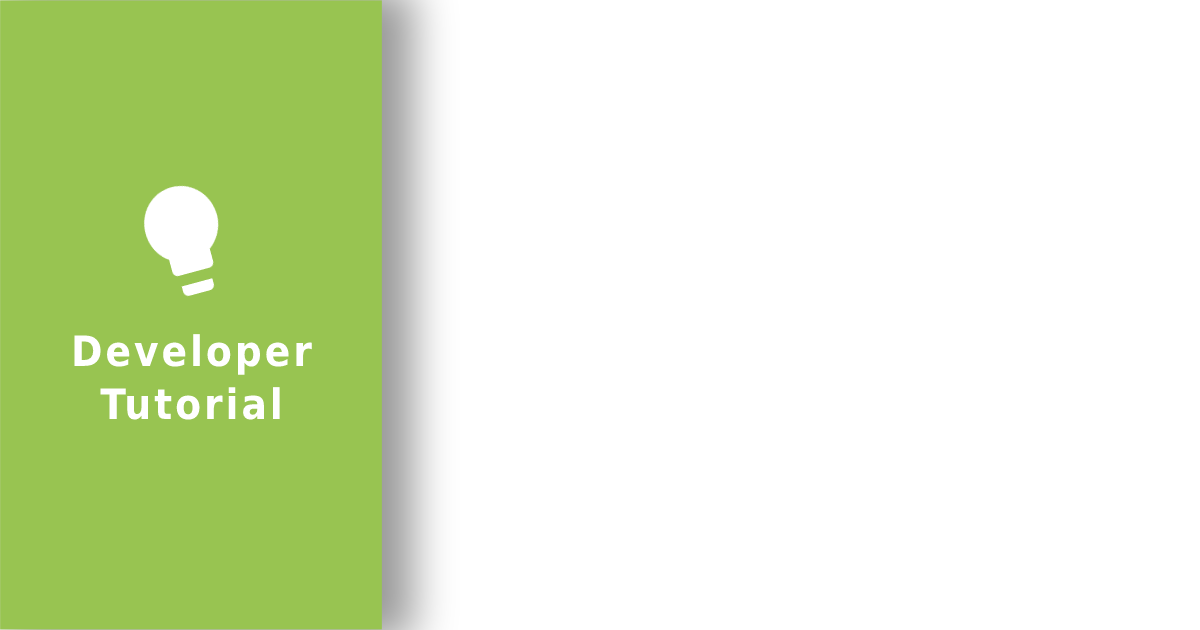
<style>
.page{position:relative;width:1200px;height:630px;background:#ffffff}
.page>*{position:absolute;margin:0}
.t1{font:41.9px/53.5px "DejaVuSansCondensed-Bold";letter-spacing:0.07em;color:#ffffff}
</style>
<div class="page">
<p class="t1" style="left:74px;top:334px;width:238px;height:86px;text-align:center">Developer<br>Tutorial</p>
</div>
